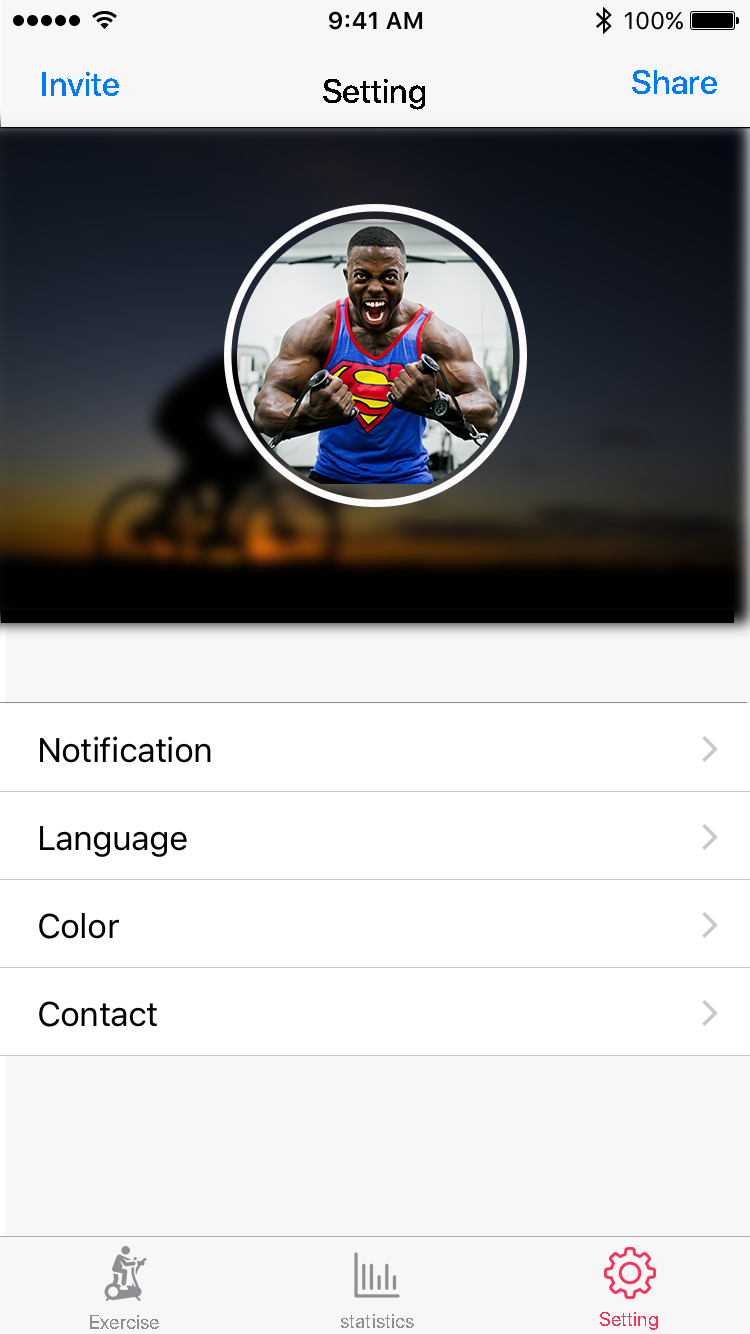
<style>
.page{position:relative;width:750px;height:1334px;background:#f7f7f7}
.page>*{position:absolute;margin:0}
.t1{font:34px "SFUIDisplay-Medium";color:#007aff}
.t2{font:34px "SFUIDisplay-Medium";color:#000000}
.t3{font:34px "SFUIText-Regular";letter-spacing:-0.024em;color:#000000}
.t4{font:20px "SFUIDisplay-Regular";color:#fc3159}
.t5{font:20px "SFUIDisplay-Regular";color:#8e8e93}
</style>
<div class="page">
<p class="t1" style="left:42px;top:72px;width:77px;height:24px">Invite</p>
<p class="t1" style="left:632px;top:70px;width:85px;height:24px">Share</p>
<p class="t2" style="left:323px;top:79px;width:102px;height:31px">Setting</p>
<p class="t3" style="left:40px;top:736px;width:171px;height:27px">Notification</p>
<p class="t3" style="left:40px;top:826px;width:147px;height:31px">Language</p>
<p class="t3" style="left:39px;top:913px;width:80px;height:26px">Color</p>
<p class="t3" style="left:39px;top:1001px;width:118px;height:26px">Contact</p>
<p class="t4" style="left:600px;top:1312px;width:58px;height:18px">Setting</p>
<p class="t5" style="left:90px;top:1315px;width:69px;height:14px">Exercise</p>
<p class="t5" style="left:341px;top:1314px;width:73px;height:14px">statistics</p>
</div>
